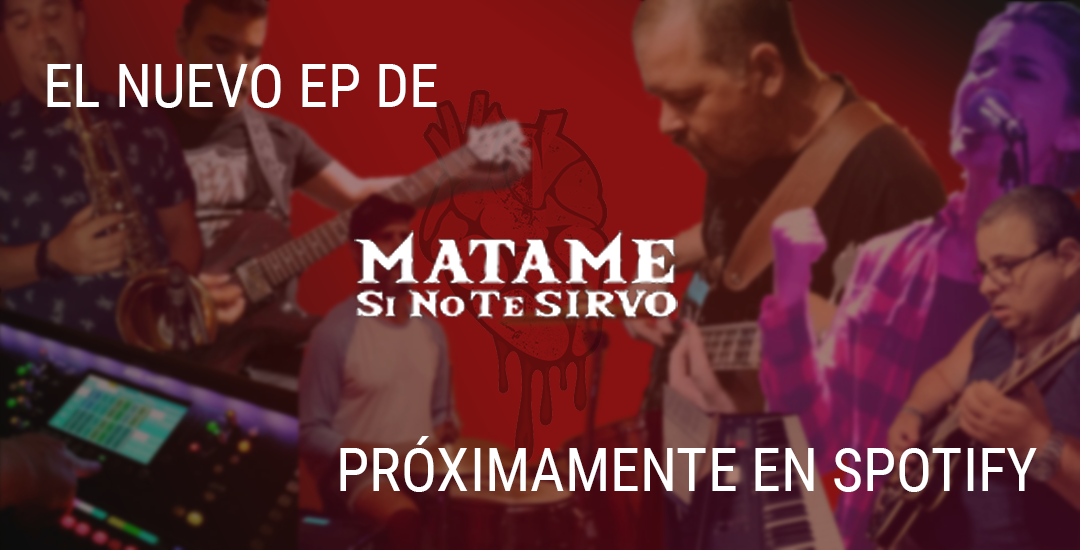
<style>
.page{position:relative;width:1080px;height:550px}
.page>*{position:absolute;margin:0}
.t1{font:60px "RobotoCondensed-Regular";color:#ffffff}
</style>
<div class="page">
<p class="t1" style="left:47px;top:64px;width:390px;height:44px">EL NUEVO EP DE</p>
<p class="t1" style="left:340px;top:436px;width:697px;height:56px">PRÓXIMAMENTE EN SPOTIFY</p>
</div>
